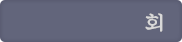
<style>
.page{position:relative;width:182px;height:42px;background:#62657b}
.page>*{position:absolute;margin:0}
.t1{font:21.2px "SDKukdetopokki-aLt";letter-spacing:0.12em;color:#d8d8d8}
</style>
<div class="page">
<p class="t1" style="left:145px;top:13px;width:18px;height:19px">회</p>
</div>
